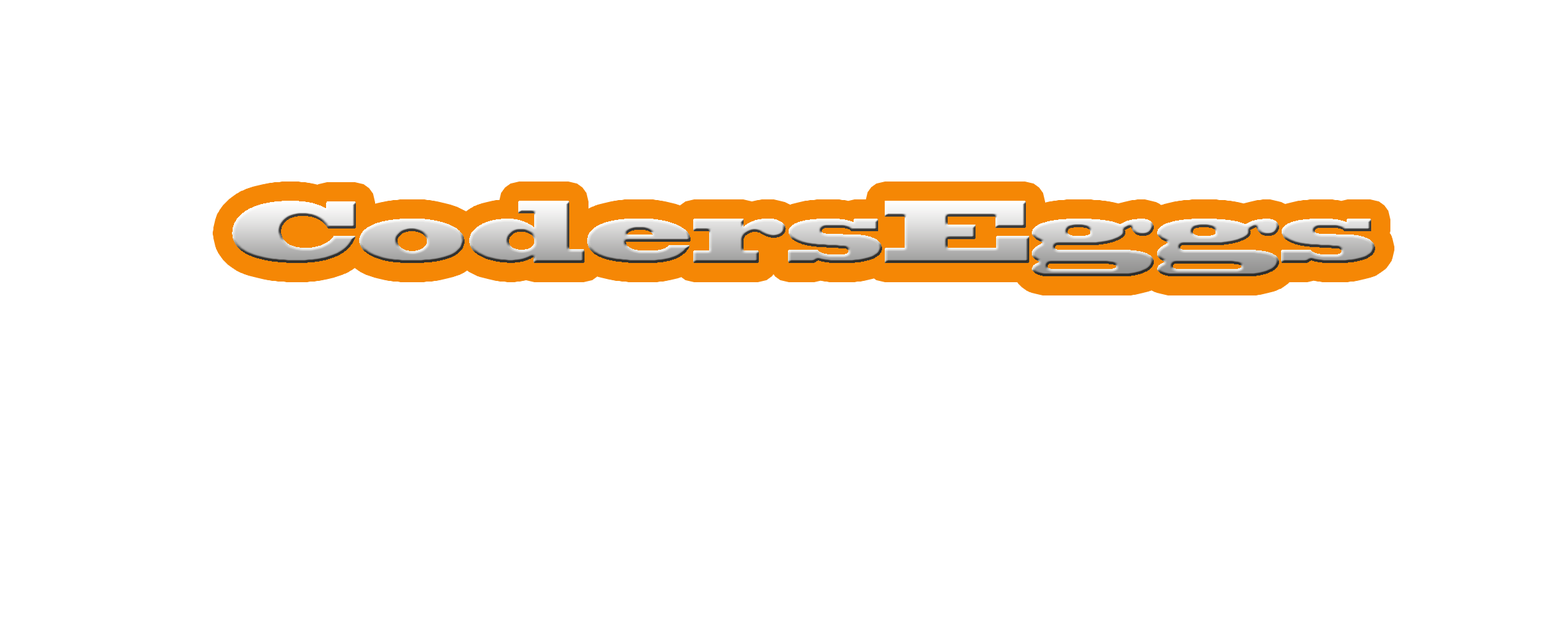
<style>
.page{position:relative;width:1568px;height:630px;background:#ffffff}
.page>*{position:absolute;margin:0}
.t1{font:82.8px "BlackoakStd";letter-spacing:-0.025em}
</style>
<div class="page">
<p class="t1" style="left:232px;top:201px;width:1143px;height:75px">CodersEggs</p>
</div>
